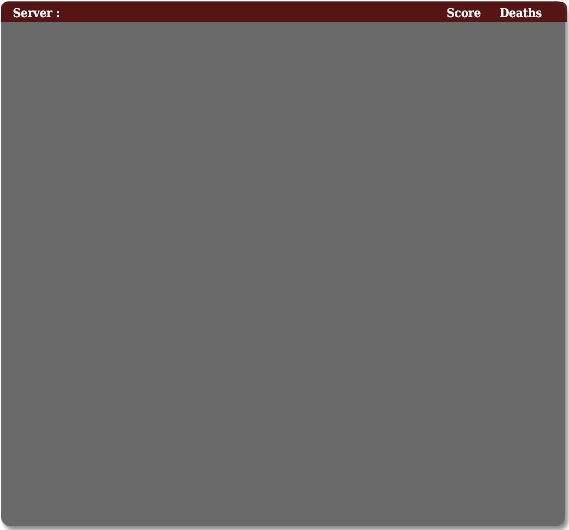
<style>
.page{position:relative;width:569px;height:530px;background:#696969}
.page>*{position:absolute;margin:0}
.t1{font:12px "DejaVuSerifCondensed-Bold";color:#fbfbfb}
</style>
<div class="page">
<p class="t1" style="left:13px;top:8px;width:529px;height:10px">Server :                                                                                                       Score     Deaths</p>
</div>
